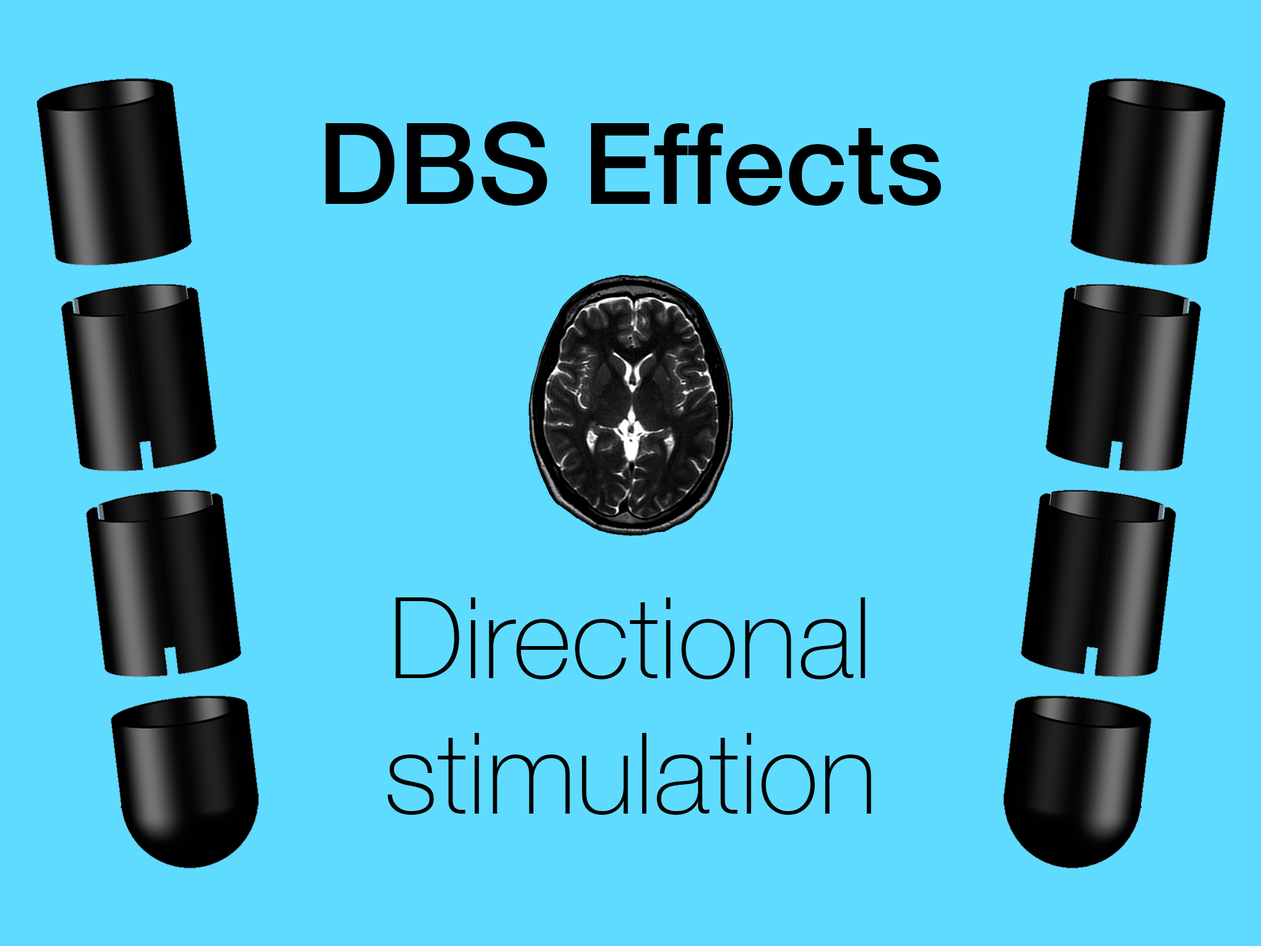
<style>
.page{position:relative;width:1261px;height:946px;background:#5fdbff}
.page>*{position:absolute;margin:0}
.t1{font:112.9px "HelveticaNeue-Thin";color:#000000}
.t2{font:112.9px "HelveticaNeue-Bold";color:#000000}
.t3{font:112.9px "HelveticaNeue-Medium";color:#000000}
</style>
<div class="page">
<p class="t1" style="left:325px;top:121px;width:616px;height:694px;text-align:center"><span class="t2"><br></span><span class="t3">DBS Effects<br><br><br></span>Directional<br>stimulation</p>
</div>
